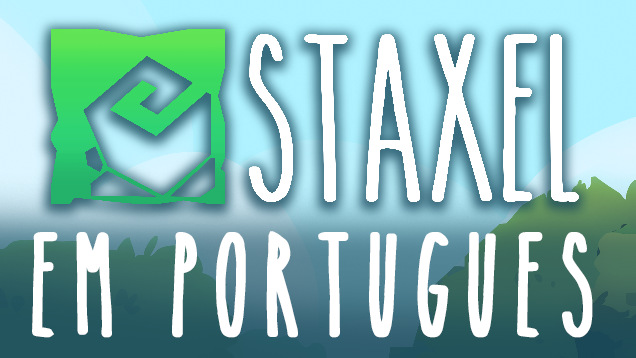
<style>
.page{position:relative;width:636px;height:358px}
.page>*{position:absolute;margin:0}
.t1{font:100px "TheSkinnybold";letter-spacing:0.1em;color:#ffffff;font-weight:bold}
</style>
<div class="page">
<p class="t1" style="left:32px;top:231px;width:561px;height:107px">Em Portugues</p>
</div>
